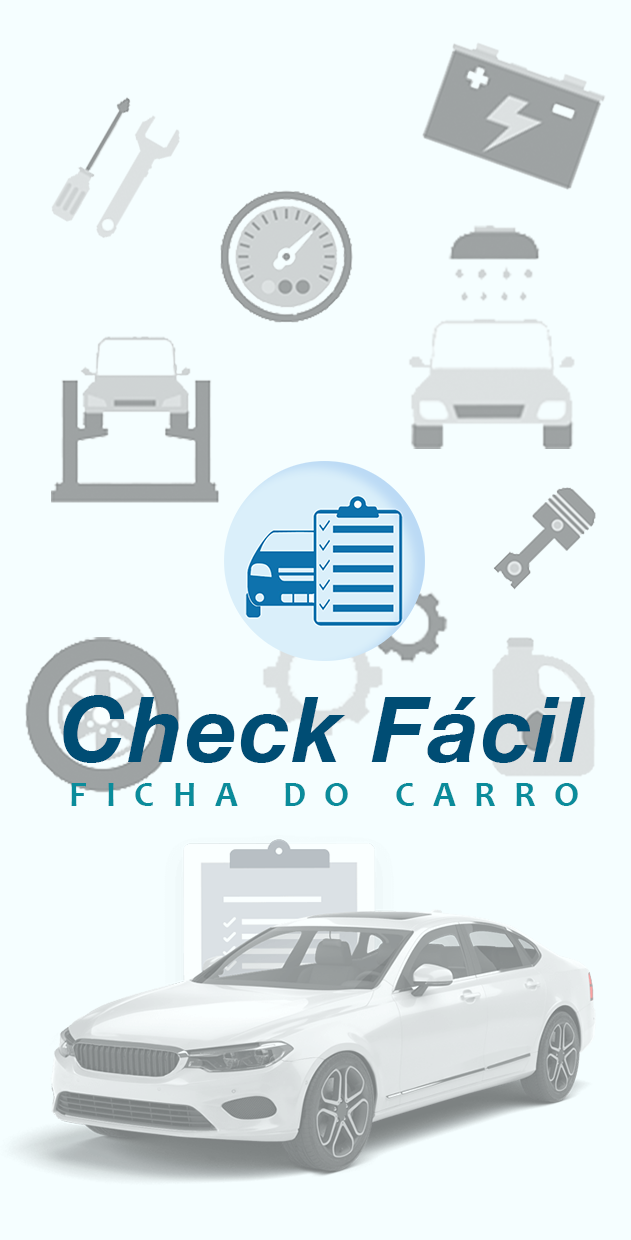
<style>
.page{position:relative;width:631px;height:1240px;background:#f5feff}
.page>*{position:absolute;margin:0}
.t1{font:90px "HelveticaNeue-BoldItalic";letter-spacing:0.025em;color:#004d74}
.t2{font:36px "Candara-Bold";letter-spacing:0.15em;color:#0a8c9b;text-transform:uppercase}
</style>
<div class="page">
<p class="t1" style="left:63px;top:695px;width:523px;height:68px">Check Fácil</p>
<p class="t2" style="left:71px;top:783px;width:507px;height:23px">F i c h a   d o   C a r r o</p>
</div>
